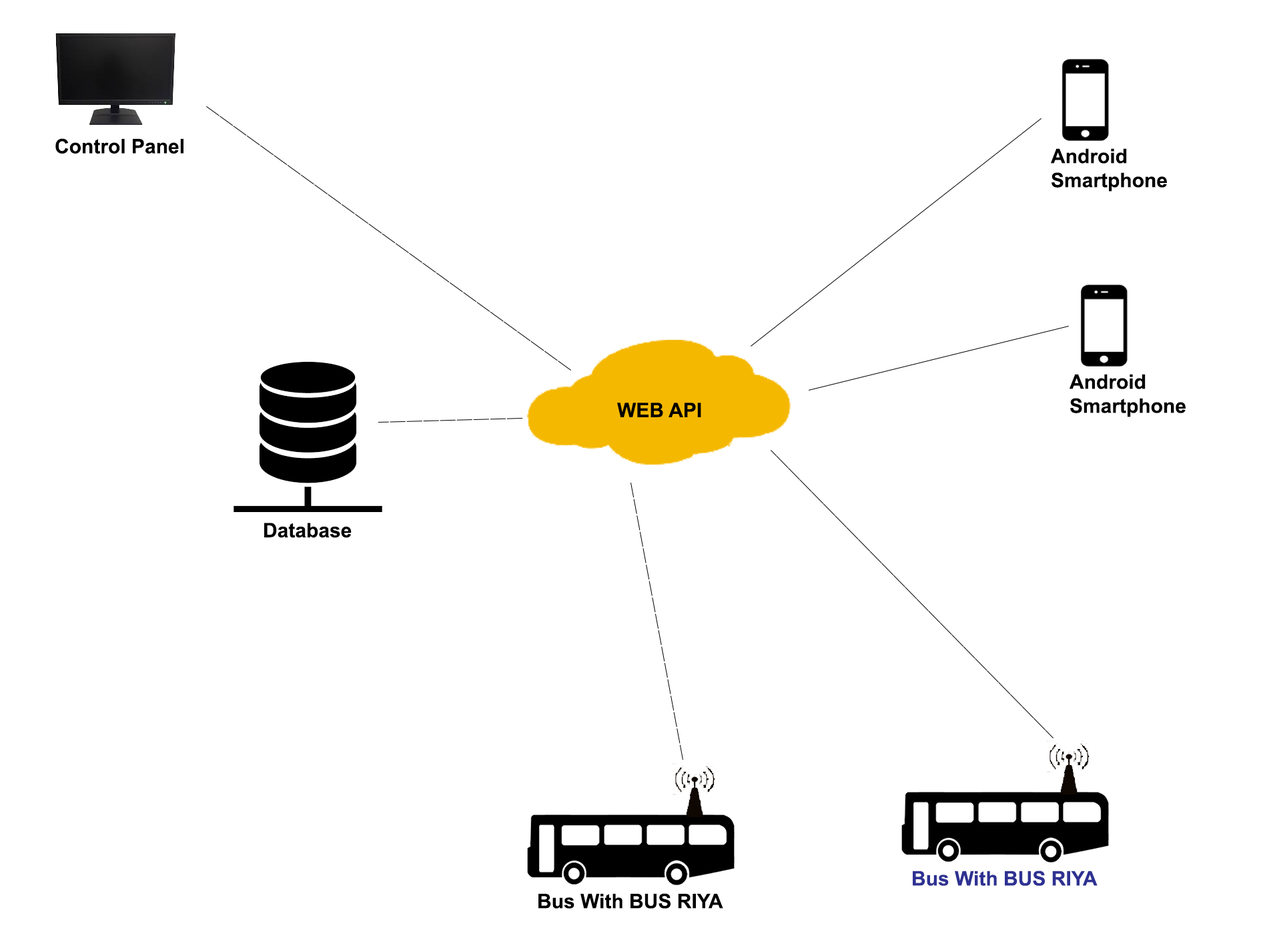
<style>
.page{position:relative;width:1261px;height:946px;background:#ffffff}
.page>*{position:absolute;margin:0}
.t1{font:20px "Arial-BoldMT";color:#000000}
.t2{font:20px "Arial-BoldMT";color:#2e3192}
</style>
<div class="page">
<p class="t1" style="left:55px;top:138px;width:128px;height:15px">Control Panel</p>
<p class="t1" style="left:1051px;top:148px;width:116px;height:44px">Android<br>Smartphone</p>
<p class="t1" style="left:1070px;top:374px;width:116px;height:43px">Android<br>Smartphone</p>
<p class="t1" style="left:617px;top:402px;width:84px;height:15px">WEB API</p>
<p class="t1" style="left:264px;top:522px;width:88px;height:16px">Database</p>
<p class="t2" style="left:913px;top:870px;width:185px;height:15px">Bus With BUS RIYA</p>
<p class="t1" style="left:538px;top:893px;width:185px;height:15px">Bus With BUS RIYA</p>
</div>
